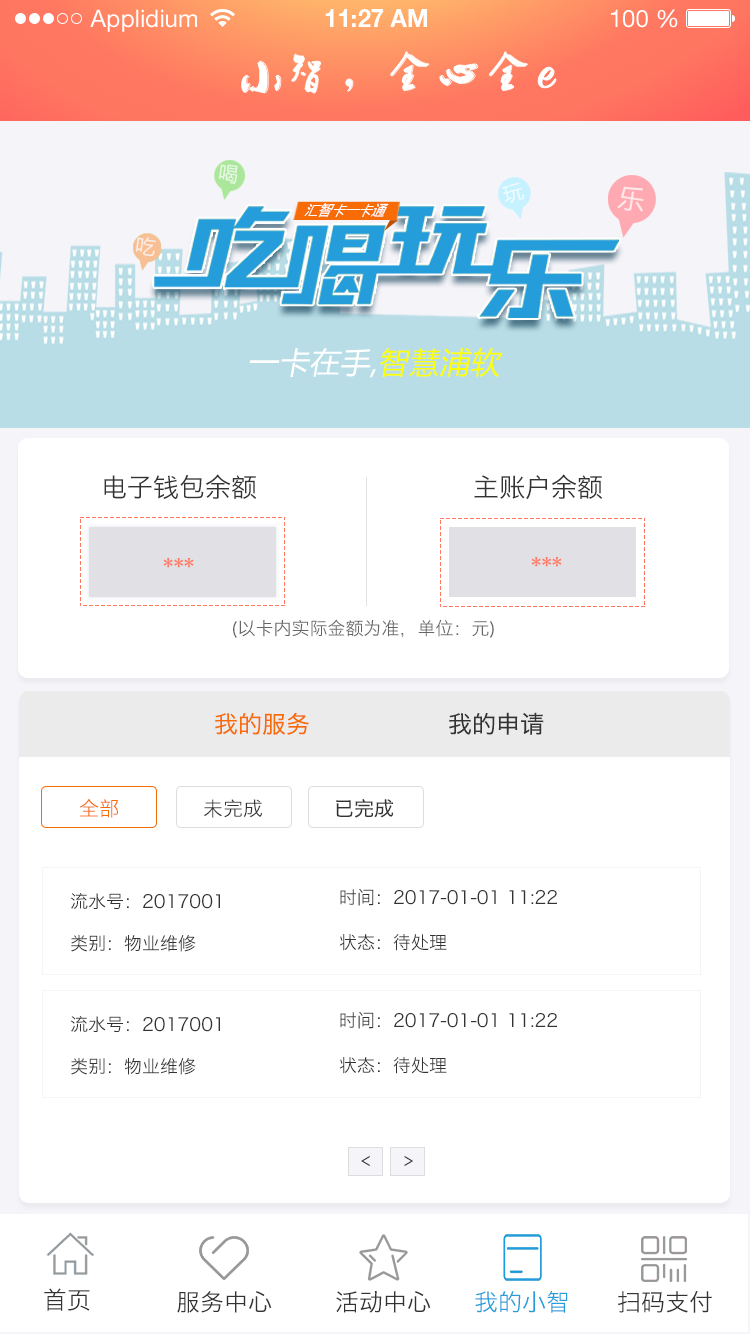
<style>
.page{position:relative;width:750px;height:1334px;background:#ffffff}
.page>*{position:absolute;margin:0}
.t1{font:24px "HelveticaNeueLTStd-Roman";color:#ffffff}
.t2{font:24px "HelveticaNeueLTStd-Bd";color:#ffffff}
.t3{font:19.9px "MicrosoftYaHei";letter-spacing:0.02em;color:#e8f8e4}
.t4{font:19.9px "MicrosoftYaHei";letter-spacing:0.02em;color:#ffffff}
.t5{font:26.7px "MicrosoftYaHei";letter-spacing:0.02em;color:#ffffff}
.t6{font:15.8px "MicrosoftYaHei";letter-spacing:0.02em;color:#ffffff;scale:0.82 1}
.t7{font:20px "MicrosoftYaHei";letter-spacing:0.02em;color:#fdede2}
.t8{font:30px "MicrosoftYaHei";letter-spacing:0.02em;color:#ffffff;font-style:italic}
.t9{font:30px "MicrosoftYaHei";letter-spacing:0.02em;color:#fcff00;font-style:italic}
.t10{font:26px "HiraginoSansGB-W3";color:#333333;text-transform:uppercase}
.t11{font:30px "HiraginoSansGB-W3";color:#ff7761;text-transform:uppercase}
.t12{font:18px "HiraginoSansGB-W3";color:#666666;text-transform:uppercase}
.t13{font:24px "HiraginoSansGB-W3";color:#f76c07;text-transform:uppercase}
.t14{font:24px "HiraginoSansGB-W3";color:#333333;text-transform:uppercase}
.t15{font:20px "HiraginoSansGB-W3";color:#f76c07;text-transform:uppercase}
.t16{font:20px "HiraginoSansGB-W3";color:#333333;text-transform:uppercase}
.t17{font:18px "HiraginoSansGB-W3";color:#333333;text-transform:uppercase}
.t18{font:24px "HiraginoSansGB-W3";color:#259dda;text-transform:uppercase}
</style>
<div class="page">
<p class="t1" style="left:90px;top:9px;width:107px;height:23px">Applidium</p>
<p class="t2" style="left:325px;top:9px;width:102px;height:18px">11:27 AM</p>
<p class="t1" style="left:611px;top:9px;width:67px;height:19px">100 %</p>
<p class="t3" style="left:219px;top:164px;width:19px;height:20px;rotate:8deg">喝</p>
<p class="t4" style="left:501px;top:182px;width:24px;height:21px;rotate:-15deg;opacity:0.7">玩</p>
<p class="t5" style="left:617px;top:186px;width:27px;height:26px;rotate:8deg;opacity:0.7">乐</p>
<p class="t6" style="left:304px;top:202px;width:85px;height:16px">汇智卡一卡通</p>
<p class="t7" style="left:135px;top:237px;width:21px;height:20px;rotate:8deg">吃</p>
<p class="t8" style="left:249px;top:347px;width:254px;height:31px">一卡在手,<span class="t9">智慧浦软</span></p>
<p class="t10" style="left:104px;top:474px;width:153px;height:25px">电子钱包余额</p>
<p class="t10" style="left:474px;top:474px;width:129px;height:26px">主账户余额</p>
<p class="t11" style="left:163px;top:558px;width:31px;height:10px">***</p>
<p class="t11" style="left:531px;top:557px;width:31px;height:10px">***</p>
<p class="t12" style="left:233px;top:619px;width:261px;height:19px">(以卡内实际金额为准，单位：元)</p>
<p class="t13" style="left:215px;top:712px;width:94px;height:23px">我的服务</p>
<p class="t14" style="left:449px;top:712px;width:95px;height:23px">我的申请</p>
<p class="t15" style="left:79px;top:798px;width:39px;height:20px">全部</p>
<p class="t16" style="left:204px;top:799px;width:58px;height:19px">未完成</p>
<p class="t16" style="left:336px;top:799px;width:58px;height:19px">已完成</p>
<p class="t17" style="left:70px;top:893px;width:150px;height:16px">流水号：2017001</p>
<p class="t17" style="left:340px;top:888px;width:217px;height:18px">时间：2017-01-01 11:22</p>
<p class="t17" style="left:71px;top:934px;width:125px;height:18px">类别：物业维修</p>
<p class="t17" style="left:339px;top:934px;width:108px;height:17px">状态：待处理</p>
<p class="t17" style="left:340px;top:1011px;width:217px;height:18px">时间：2017-01-01 11:22</p>
<p class="t17" style="left:70px;top:1016px;width:150px;height:16px">流水号：2017001</p>
<p class="t17" style="left:71px;top:1057px;width:125px;height:18px">类别：物业维修</p>
<p class="t17" style="left:339px;top:1057px;width:108px;height:17px">状态：待处理</p>
<p class="t17" style="left:361px;top:1155px;width:9px;height:12px">&lt;</p>
<p class="t17" style="left:404px;top:1155px;width:9px;height:12px">&gt;</p>
<p class="t14" style="left:44px;top:1288px;width:46px;height:23px">首页</p>
<p class="t14" style="left:177px;top:1291px;width:95px;height:22px">服务中心</p>
<p class="t14" style="left:336px;top:1291px;width:95px;height:22px">活动中心</p>
<p class="t18" style="left:475px;top:1290px;width:93px;height:23px">我的小智</p>
<p class="t14" style="left:618px;top:1290px;width:94px;height:23px">扫码支付</p>
</div>
